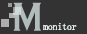
<style>
.page{position:relative;width:87px;height:34px;background:#333333}
.page>*{position:absolute;margin:0}
.t1{font:41.5px "CopperplateGothic-Bold";letter-spacing:-0.023em;color:#b2bcba;scale:0.76 1}
.t2{font:10px "SimSun";letter-spacing:-0.023em;color:#e6f4f1}
</style>
<div class="page">
<p class="t1" style="left:13px;top:2px;width:28px;height:29px">M</p>
<p class="t2" style="left:43px;top:23px;width:34px;height:7px">monitor</p>
<p class="t2" style="left:43px;top:23px;width:34px;height:7px">monitor</p>
</div>
